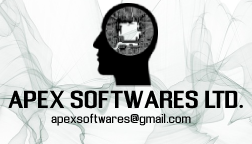
<style>
.page{position:relative;width:252px;height:144px}
.page>*{position:absolute;margin:0}
.t1{font:23px "EnigmaticBold";color:#000000}
.t2{font:12px "Enigmatic";color:#000000}
</style>
<div class="page">
<p class="t1" style="left:8px;top:90px;width:235px;height:19px">APEX SOFTWARES LTD.</p>
<p class="t2" style="left:51px;top:113px;width:140px;height:13px">apexsoftwares@gmail.com</p>
</div>
